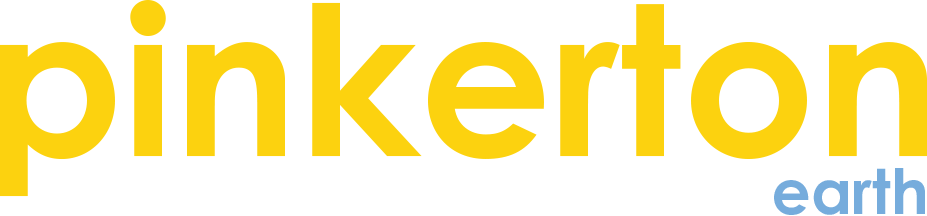
<style>
.page{position:relative;width:927px;height:216px;background:#ffffff}
.page>*{position:absolute;margin:0}
.t1{font:208.3px "CenturyGothicPro-Bold";color:#fcd20f}
.t2{font:62.5px "CenturyGothicPro-Bold";color:#76acdc}
</style>
<div class="page">
<p class="t1" style="left:0px;top:0px;width:927px;height:197px">pinkerton</p>
<p class="t2" style="left:774px;top:168px;width:151px;height:47px">earth</p>
</div>
